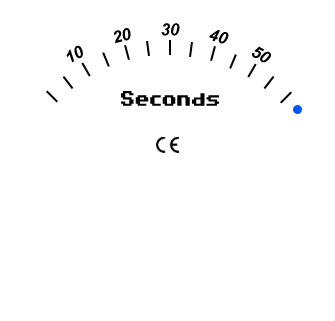
<style>
.page{position:relative;width:335px;height:321px;background:#ffffff}
.page>*{position:absolute;margin:0}
.t1{font:16.7px "Arial-BoldItalicMT";color:#000000}
.t2{font:16.7px "C64Pro";color:#000000}
</style>
<div class="page">
<p class="t1" style="left:114px;top:28px;width:17px;height:16px;rotate:-15deg">20</p>
<p class="t1" style="left:161px;top:23px;width:19px;height:13px">30</p>
<p class="t1" style="left:209px;top:30px;width:20px;height:14px;rotate:15deg">40</p>
<p class="t1" style="left:66px;top:45px;width:17px;height:18px;rotate:-30deg">10</p>
<p class="t1" style="left:252px;top:46px;width:19px;height:17px;rotate:30deg">50</p>
<p class="t2" style="left:121px;top:91px;width:98px;height:15px">Seconds</p>
</div>
